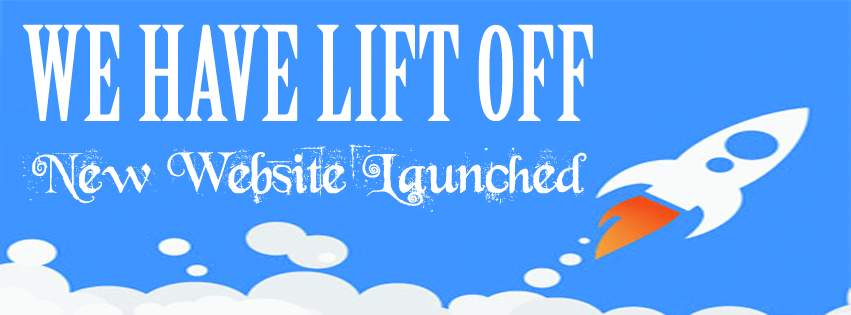
<style>
.page{position:relative;width:851px;height:315px;background:#3f95ff}
.page>*{position:absolute;margin:0}
.t1{font:60px "BeyondWonderland";color:#ffffff}
.t2{font:128px "BirchStd";color:#ffffff}
</style>
<div class="page">
<p class="t1" style="left:22px;top:24px;width:571px;height:188px;text-align:center"><span class="t2">WE HAVE LIFT OFF<br></span>New Website Launched</p>
</div>
